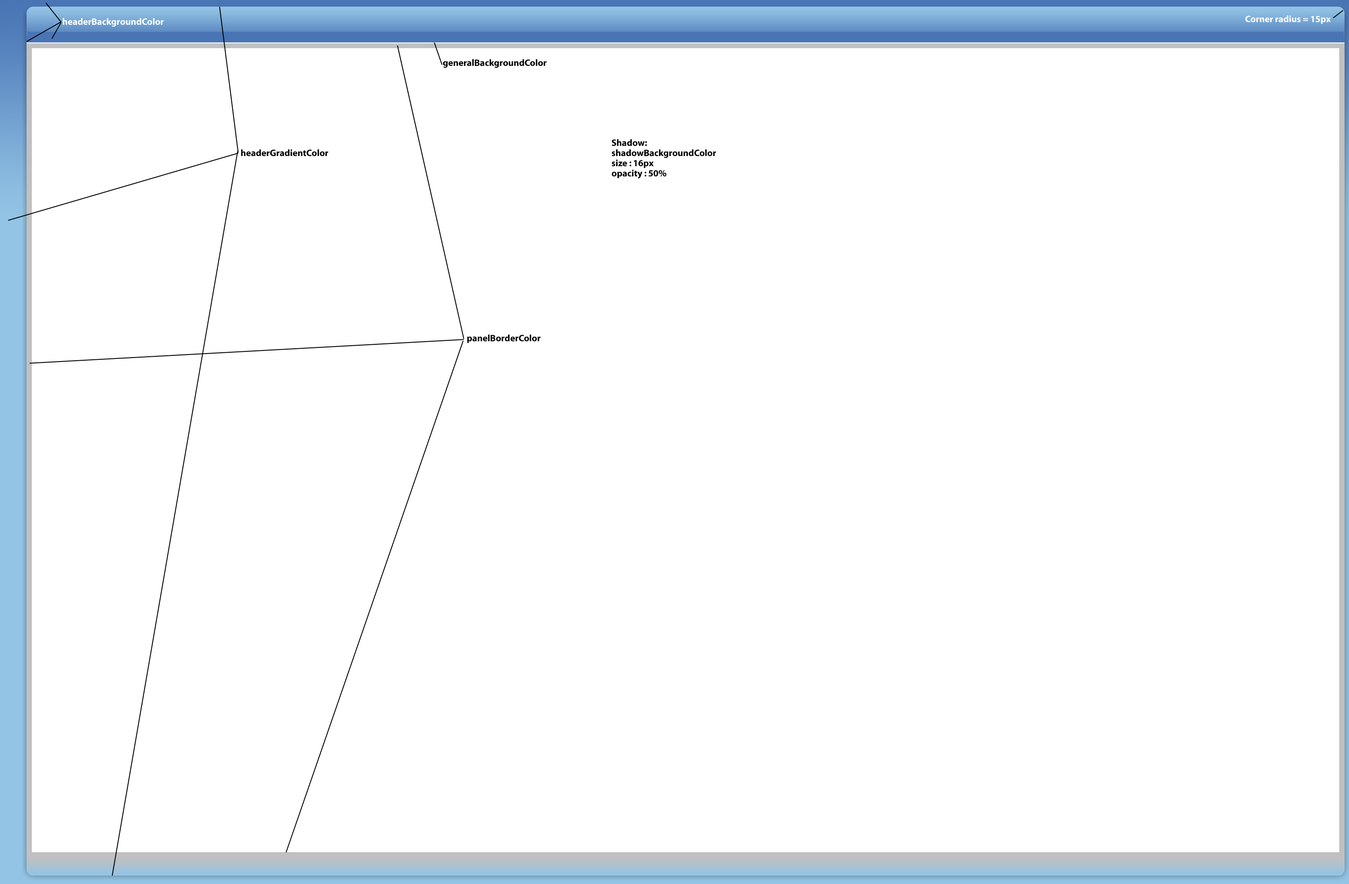
<style>
.page{position:relative;width:1349px;height:884px;background:#ffffff}
.page>*{position:absolute;margin:0}
.t1{font:9.3px "Myriad-Bold";color:#ffffff}
.t2{font:9.3px "Myriad-Bold";color:#000000}
.t3{font:9.3px/10.2px "Myriad-Bold";color:#000000}
</style>
<div class="page">
<p class="t1" style="left:1245px;top:15px;width:85px;height:9px">Corner radius = 15px</p>
<p class="t1" style="left:63px;top:18px;width:101px;height:9px">headerBackgroundColor</p>
<p class="t2" style="left:443px;top:59px;width:103px;height:9px">generalBackgroundColor</p>
<p class="t2" style="left:241px;top:149px;width:87px;height:8px">headerGradientColor</p>
<p class="t3" style="left:611px;top:139px;width:105px;height:40px">Shadow:<br>shadowBackgroundColor<br>size : 16px<br>opacity : 50%</p>
<p class="t2" style="left:467px;top:335px;width:73px;height:8px">panelBorderColor</p>
</div>
